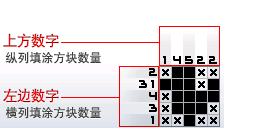
<style>
.page{position:relative;width:256px;height:128px;background:#ffffff}
.page>*{position:absolute;margin:0}
.t1{font:14.7px "DFPHeiW5-GB";letter-spacing:-0.04em}
.t2{font:12px "DFPHeiW5-GB";color:#3c3c3c}
</style>
<div class="page">
<p class="t1" style="left:3px;top:33px;width:56px;height:15px">上方数字</p>
<p class="t2" style="left:5px;top:52px;width:96px;height:12px">纵列填涂方块数量</p>
<p class="t1" style="left:3px;top:88px;width:56px;height:15px">左边数字</p>
<p class="t2" style="left:5px;top:106px;width:96px;height:13px">横列填涂方块数量</p>
</div>
